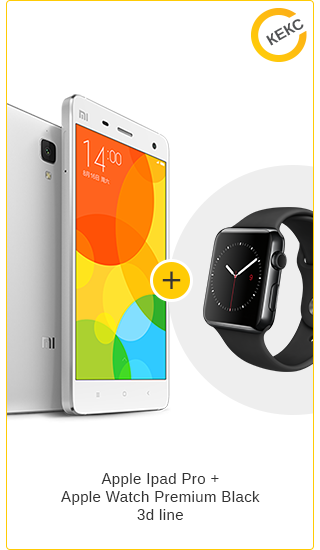
<style>
.page{position:relative;width:320px;height:550px;background:#ffffff}
.page>*{position:absolute;margin:0}
.t1{font:35.8px "Arimo";letter-spacing:0.025em;color:#333333}
.t2{font:15px "Arimo";letter-spacing:0.025em;color:#333333}
</style>
<div class="page">
<p class="t1" style="left:162px;top:271px;width:19px;height:18px">+</p>
<p class="t2" style="left:61px;top:473px;width:199px;height:47px;text-align:center">Apple Ipad Pro +<br>Apple Watch Premium Black<br>3d line</p>
</div>
